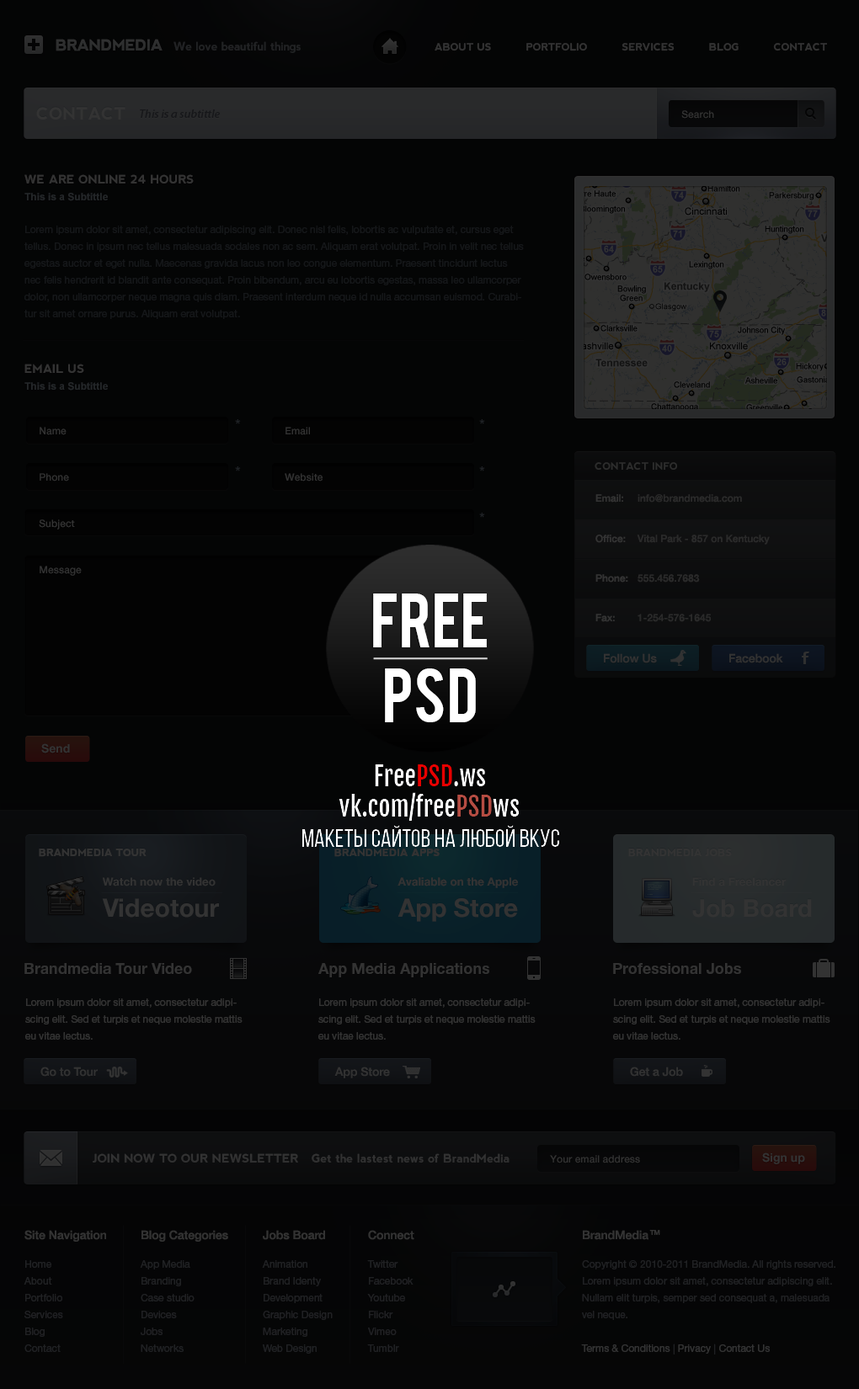
<style>
.page{position:relative;width:859px;height:1389px;background:#040505}
.page>*{position:absolute;margin:0}
.t1{font:15.2px "nevis-Bold";letter-spacing:-0.025em;color:#2d2e2f}
.t2{font:11.8px "nevis-Bold";letter-spacing:-0.025em;color:#212224}
.t3{font:10.1px "nevis-Bold";color:#333333}
.t4{font:16.8px "nevis-Bold";color:#333333}
.t5{font:11.8px "MyriadPro-SemiboldIt";color:#16171a}
.t6{font:10.1px "HelveticaNeueLTStd-Md";color:#333333}
.t7{font:11.8px "nevis-Bold";color:#333333;text-transform:uppercase}
.t8{font:10.1px "Helvetica-Bold";color:#242729}
.t9{font:10.1px/16.8px "HelveticaNeueLTStd-Roman";color:#151719}
.t10{font:10.1px "nevis-Bold";color:#2d2d2d}
.t11{font:10.1px "HelveticaNeueLTStd-Md";color:#2a2a2a}
.t12{font:11.8px "HelveticaNeueLTStd-Md";color:#313132}
.t13{font:11.8px "HelveticaNeueLTStd-Md";color:#313232}
.t14{font:11.8px "HelveticaNeue-Bold";color:#333333}
.t15{font:11.3px "HelveticaNeue-Bold";color:#333333}
.t16{font:25.3px "HelveticaNeue-Bold";color:#333333}
.t17{font:24.4px "HelveticaNeue-Bold";color:#333333}
.t18{font:15.2px "HelveticaNeueLTStd-Bd";color:#333333}
.t19{font:10.1px/16.8px "HelveticaNeueLTStd-Roman";color:#333333}
.t20{font:11.8px "HelveticaNeueLTStd-Md";color:#313131}
.t21{font:11.8px "HelveticaNeueLTStd-Md";color:#323232}
.t22{font:11.8px "nevis-Bold";color:#313232}
.t23{font:11.8px "nevis-Bold";color:#303131}
.t24{font:11.8px "HelveticaNeueLTStd-Md";color:#333333}
.t25{font:10.1px/16.8px "HelveticaNeueLTStd-Roman";color:#202123}
</style>
<div class="page">
<p class="t1" style="left:56px;top:39px;width:106px;height:12px">BRANDMEDIA</p>
<p class="t2" style="left:173px;top:41px;width:127px;height:12px">We love beautiful things</p>
<p class="t3" style="left:434px;top:43px;width:393px;height:8px">ABOUT US          PORTFOLIO          SERVICES          BLOG          CONTACT</p>
<p class="t4" style="left:36px;top:107px;width:89px;height:13px">CONTACT</p>
<p class="t5" style="left:140px;top:109px;width:80px;height:9px">This is a subtittle</p>
<p class="t6" style="left:681px;top:110px;width:33px;height:9px">Search</p>
<p class="t7" style="left:24px;top:174px;width:170px;height:9px">WE ARE ONLINE 24 HOURS</p>
<p class="t8" style="left:24px;top:193px;width:84px;height:8px">This is a Subtittle</p>
<p class="t9" style="left:24px;top:226px;width:500px;height:93px">Lorem ipsum dolor sit amet, consectetur adipiscing elit. Donec nisl felis, lobortis ac vulputate et, cursus eget tellus. Donec in ipsum nec tellus malesuada sodales non ac sem. Aliquam erat volutpat. Proin in velit nec tellus egestas auctor et eget nulla. Maecenas gravida lacus non leo congue elementum. Praesent tincidunt lectus nec felis hendrerit id blandit ante consequat. Proin bibendum, arcu eu lobortis egestas, massa leo ullamcorper dolor, non ullamcorper neque magna quis diam. Praesent interdum neque id nulla accumsan euismod. Curabitur sit amet ornare purus. Aliquam erat volutpat.</p>
<p class="t7" style="left:24px;top:364px;width:60px;height:9px">EMAIL US</p>
<p class="t8" style="left:24px;top:382px;width:84px;height:9px">This is a Subtittle</p>
<p class="t6" style="left:40px;top:427px;width:26px;height:8px">Name</p>
<p class="t6" style="left:285px;top:427px;width:25px;height:8px">Email</p>
<p class="t6" style="left:40px;top:473px;width:29px;height:8px">Phone</p>
<p class="t6" style="left:285px;top:473px;width:37px;height:8px">Website</p>
<p class="t10" style="left:594px;top:462px;width:83px;height:8px">CONTACT INFO</p>
<p class="t6" style="left:595px;top:494px;width:28px;height:9px">Email:</p>
<p class="t11" style="left:637px;top:494px;width:105px;height:9px">info@brandmedia.com</p>
<p class="t6" style="left:39px;top:519px;width:36px;height:10px">Subject</p>
<p class="t6" style="left:595px;top:535px;width:30px;height:8px">Office:</p>
<p class="t11" style="left:636px;top:535px;width:133px;height:10px">Vital Park - 857 on Kentucky</p>
<p class="t6" style="left:40px;top:566px;width:42px;height:10px">Message</p>
<p class="t6" style="left:595px;top:574px;width:33px;height:8px">Phone:</p>
<p class="t11" style="left:637px;top:574px;width:62px;height:8px">555.456.7683</p>
<p class="t6" style="left:595px;top:614px;width:19px;height:8px">Fax:</p>
<p class="t11" style="left:637px;top:614px;width:73px;height:8px">1-254-576-1645</p>
<p class="t12" style="left:604px;top:653px;width:53px;height:10px">Follow Us</p>
<p class="t13" style="left:729px;top:653px;width:54px;height:10px">Facebook</p>
<p class="t14" style="left:41px;top:743px;width:29px;height:10px">Send</p>
<p class="t3" style="left:39px;top:848px;width:107px;height:9px">BRANDMEDIA TOUR</p>
<p class="t3" style="left:334px;top:848px;width:105px;height:9px">BRANDMEDIA APPS</p>
<p class="t3" style="left:628px;top:848px;width:103px;height:9px">BRANDMEDIA JOBS</p>
<p class="t15" style="left:102px;top:877px;width:113px;height:9px">Watch now the video</p>
<p class="t15" style="left:397px;top:877px;width:121px;height:11px">Avaliable on the Apple</p>
<p class="t15" style="left:692px;top:877px;width:94px;height:9px">Find a Freelancer</p>
<p class="t16" style="left:102px;top:898px;width:117px;height:19px">Videotour</p>
<p class="t16" style="left:397px;top:898px;width:121px;height:24px">App Store</p>
<p class="t17" style="left:692px;top:899px;width:119px;height:18px">Job Board</p>
<p class="t18" style="left:24px;top:963px;width:168px;height:11px">Brandmedia Tour Video</p>
<p class="t18" style="left:318px;top:963px;width:171px;height:14px">App Media Applications</p>
<p class="t18" style="left:613px;top:963px;width:128px;height:11px">Professional Jobs</p>
<p class="t19" style="left:25px;top:998px;width:217px;height:42px">Lorem ipsum dolor sit amet, consectetur adipiscing elit. Sed et turpis et neque molestie mattis eu vitae lectus.</p>
<p class="t19" style="left:318px;top:998px;width:217px;height:42px">Lorem ipsum dolor sit amet, consectetur adipiscing elit. Sed et turpis et neque molestie mattis eu vitae lectus.</p>
<p class="t19" style="left:613px;top:998px;width:217px;height:42px">Lorem ipsum dolor sit amet, consectetur adipiscing elit. Sed et turpis et neque molestie mattis eu vitae lectus.</p>
<p class="t20" style="left:40px;top:1066px;width:58px;height:11px">Go to Tour</p>
<p class="t21" style="left:334px;top:1066px;width:56px;height:12px">App Store</p>
<p class="t12" style="left:630px;top:1066px;width:53px;height:11px">Get a Job</p>
<p class="t22" style="left:93px;top:1153px;width:205px;height:10px">JOIN NOW TO OUR NEWSLETTER</p>
<p class="t23" style="left:311px;top:1153px;width:198px;height:10px">Get the lastest news of BrandMedia</p>
<p class="t6" style="left:550px;top:1155px;width:90px;height:8px">Your email address</p>
<p class="t14" style="left:762px;top:1152px;width:43px;height:12px">Sign up</p>
<p class="t24" style="left:24px;top:1230px;width:82px;height:12px">Site Navigation</p>
<p class="t24" style="left:141px;top:1230px;width:87px;height:12px">Blog Categories</p>
<p class="t24" style="left:263px;top:1230px;width:62px;height:10px">Jobs Board</p>
<p class="t24" style="left:368px;top:1230px;width:46px;height:10px">Connect</p>
<p class="t24" style="left:582px;top:1230px;width:66px;height:10px">BrandMedia</p>
<p class="t24" style="left:649px;top:1230px;width:11px;height:5px">TM</p>
<p class="t25" style="left:24px;top:1260px;width:39px;height:92px">Home<br>About<br>Portfolio<br>Services<br>Blog<br>Contact</p>
<p class="t25" style="left:140px;top:1260px;width:54px;height:92px">App Media<br>Branding<br>Case studio<br>Devices<br>Jobs<br>Networks</p>
<p class="t25" style="left:262px;top:1260px;width:70px;height:94px">Animation<br>Brand Identy<br>Development<br>Graphic Design<br>Marketing<br>Web Design</p>
<p class="t25" style="left:367px;top:1260px;width:46px;height:92px">Twitter<br>Facebook<br>Youtube<br>Flickr<br>Vimeo<br>Tumblr</p>
<p class="t25" style="left:581px;top:1260px;width:254px;height:94px">Copyright © 2010-2011 BrandMedia. All rights reserved.<br>Lorem ipsum dolor sit amet, consectetur adipiscing elit. <br>Nullam elit turpis, semper sed consequat a, malesuada <br>vel neque.<br><br>Terms &amp; Conditions | Privacy | Contact Us</p>
</div>
